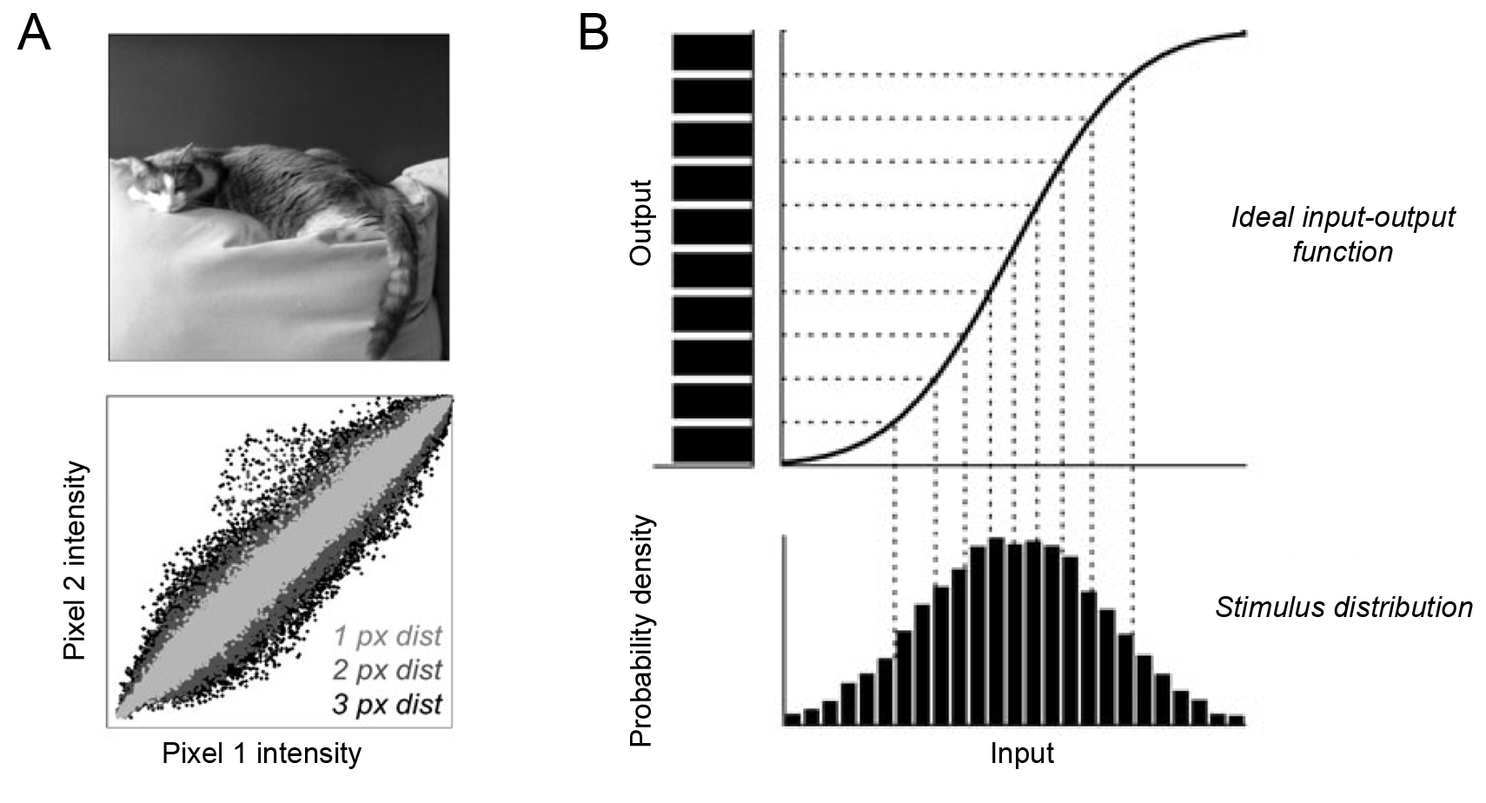
<style>
.page{position:relative;width:1486px;height:803px;background:#ffffff}
.page>*{position:absolute;margin:0}
.t1{font:50.7px "ArialMT";color:#000000}
.t2{font:29px "ArialMT";color:#000000}
.t3{font:29px "Arial-ItalicMT";color:#000000}
</style>
<div class="page">
<p class="t1" style="left:17px;top:13px;width:34px;height:37px">A</p>
<p class="t1" style="left:580px;top:13px;width:28px;height:37px">B</p>
<p class="t2" style="left:629px;top:180px;width:27px;height:86px;rotate:-90deg">Output</p>
<p class="t3" style="left:1232px;top:206px;width:224px;height:55px;text-align:center">Ideal input-output<br>function</p>
<p class="t2" style="left:63px;top:460px;width:27px;height:199px;rotate:-90deg">Pixel 2 intensity</p>
<p class="t2" style="left:630px;top:514px;width:27px;height:232px;rotate:-90deg">Probability density</p>
<p class="t3" style="left:1215px;top:596px;width:257px;height:21px">Stimulus distribution</p>
<p class="t2" style="left:163px;top:742px;width:198px;height:27px">Pixel 1 intensity</p>
<p class="t2" style="left:992px;top:742px;width:62px;height:27px">Input</p>
</div>
